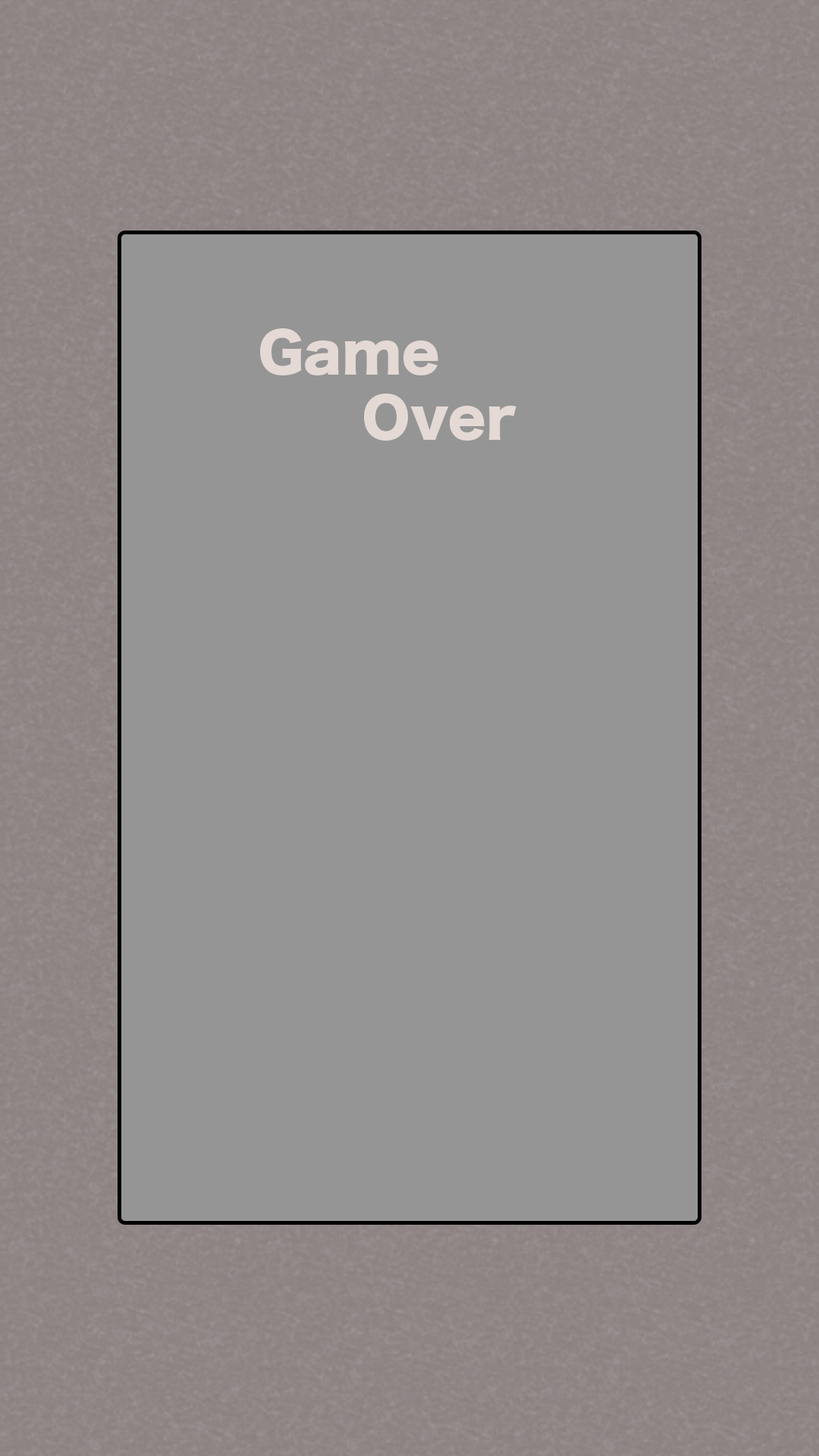
<style>
.page{position:relative;width:819px;height:1456px;background:#959595}
.page>*{position:absolute;margin:0}
.t1{font:54.6px "HiraKakuStd-W8";color:#e4d9d5}
</style>
<div class="page">
<p class="t1" style="left:260px;top:328px;width:256px;height:113px;text-align:right">Game<br>Over</p>
</div>
